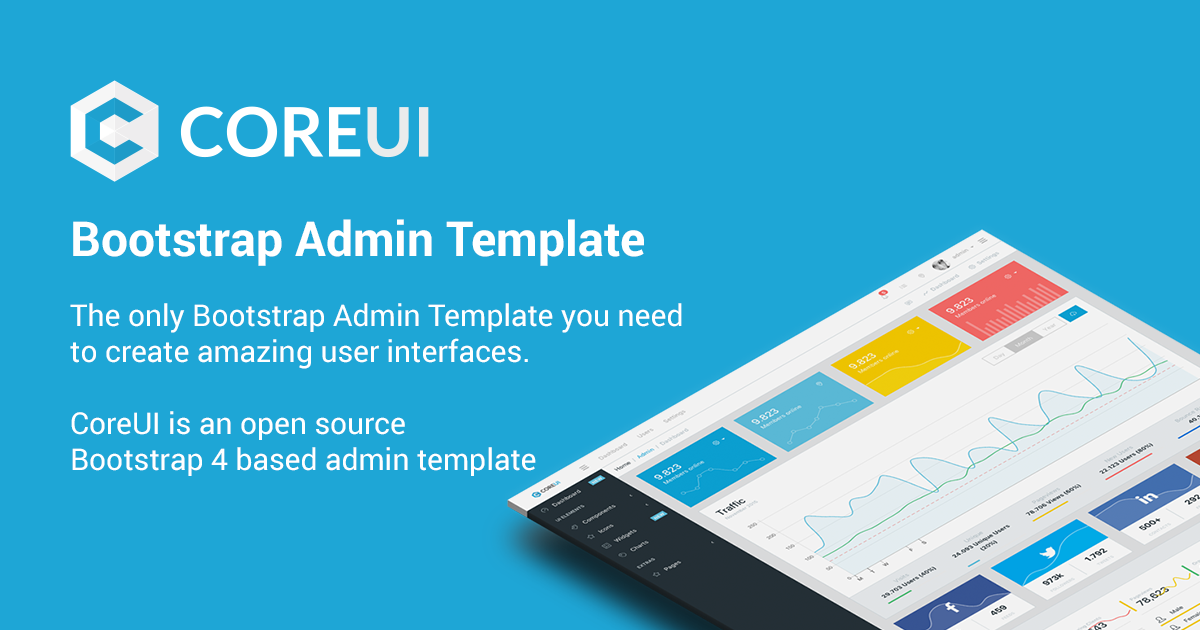
<style>
.page{position:relative;width:1200px;height:630px;background:#1ea6d6}
.page>*{position:absolute;margin:0}
.t1{font:48px "Roboto-Bold";color:#ffffff}
.t2{font:30px "Roboto-Regular";color:#ffffff}
</style>
<div class="page">
<p class="t1" style="left:73px;top:219px;width:571px;height:47px">Bootstrap Admin Template</p>
<p class="t2" style="left:70px;top:303px;width:612px;height:173px">The only Bootstrap Admin Template you need <br>to create amazing user interfaces.<br><br>CoreUI is an open source <br>Bootstrap 4 based admin template</p>
</div>
